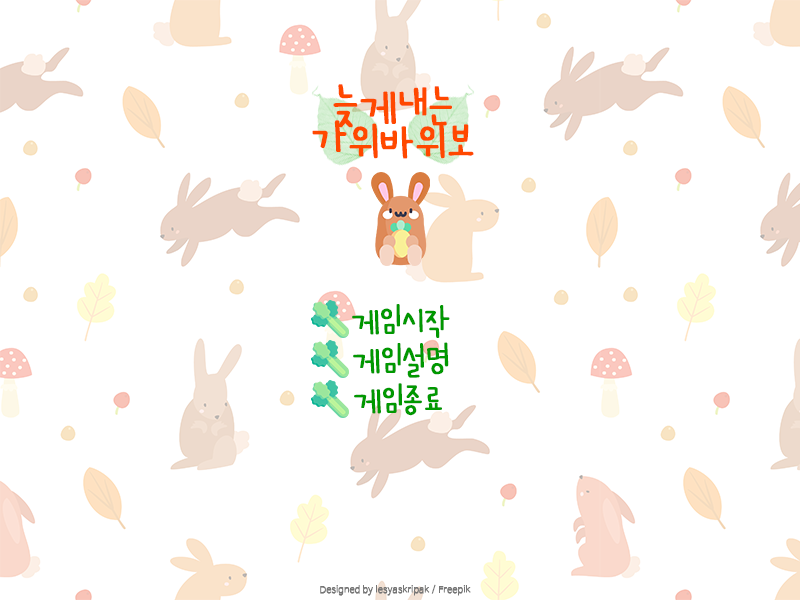
<style>
.page{position:relative;width:800px;height:600px;background:#ffffff}
.page>*{position:absolute;margin:0}
.t1{font:47.9px/37px "UhBeeMiMi";color:#ff4800;font-weight:bold}
.t2{font:36px "UhBeeMiMi";color:#009800;font-weight:bold}
.t3{font:35.6px "UhBeeMiMi";color:#009800;font-weight:bold}
.t4{font:9px "NanumBarunGothicUltraLight";color:#757575;font-weight:bold}
</style>
<div class="page">
<p class="t1" style="left:312px;top:84px;width:162px;height:75px;text-align:center">늦게내는 <br>가위바위보</p>
<p class="t2" style="left:352px;top:304px;width:98px;height:34px">게임시작</p>
<p class="t2" style="left:353px;top:342px;width:96px;height:36px">게임설명</p>
<p class="t3" style="left:354px;top:383px;width:88px;height:33px">게임종료</p>
<p class="t4" style="left:320px;top:584px;width:151px;height:12px">Designed by lesyaskripak / Freepik</p>
</div>
